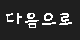
<style>
.page{position:relative;width:80px;height:40px;background:#1f1f1f}
.page>*{position:absolute;margin:0}
.t1{font:21.8px "GabiaSolmee";color:#ffffff}
</style>
<div class="page">
<p class="t1" style="left:6px;top:13px;width:66px;height:15px">다음으로</p>
</div>
